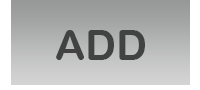
<style>
.page{position:relative;width:200px;height:90px}
.page>*{position:absolute;margin:0}
.t1{font:41.7px "ArialRoundedMTBold";color:#424242}
</style>
<div class="page">
<p class="t1" style="left:56px;top:30px;width:89px;height:30px">ADD</p>
</div>
